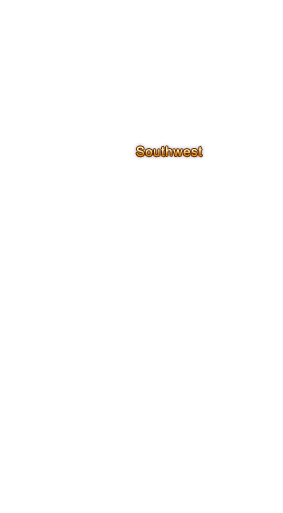
<style>
.page{position:relative;width:283px;height:513px;background:#ffffff}
.page>*{position:absolute;margin:0}
.t1{font:13px "ArialMT";letter-spacing:0.05em}
</style>
<div class="page">
<p class="t1" style="left:136px;top:146px;width:66px;height:11px">Southwest</p>
</div>
